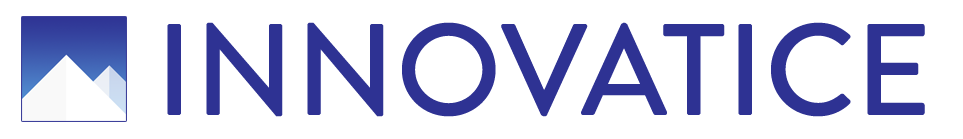
<style>
.page{position:relative;width:963px;height:139px;background:#ffffff}
.page>*{position:absolute;margin:0}
.t1{font:130px "BrandonGrotesque-Medium";color:#2e3293}
</style>
<div class="page">
<p class="t1" style="left:167px;top:22px;width:758px;height:95px">INNOVATICE</p>
</div>
